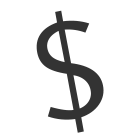
<style>
.page{position:relative;width:140px;height:140px;background:#ffffff}
.page>*{position:absolute;margin:0}
.t1{font:142px "Humanist531BT-RomanA";color:#333333}
</style>
<div class="page">
<p class="t1" style="left:36px;top:10px;width:68px;height:123px;rotate:-12deg">$</p>
</div>
